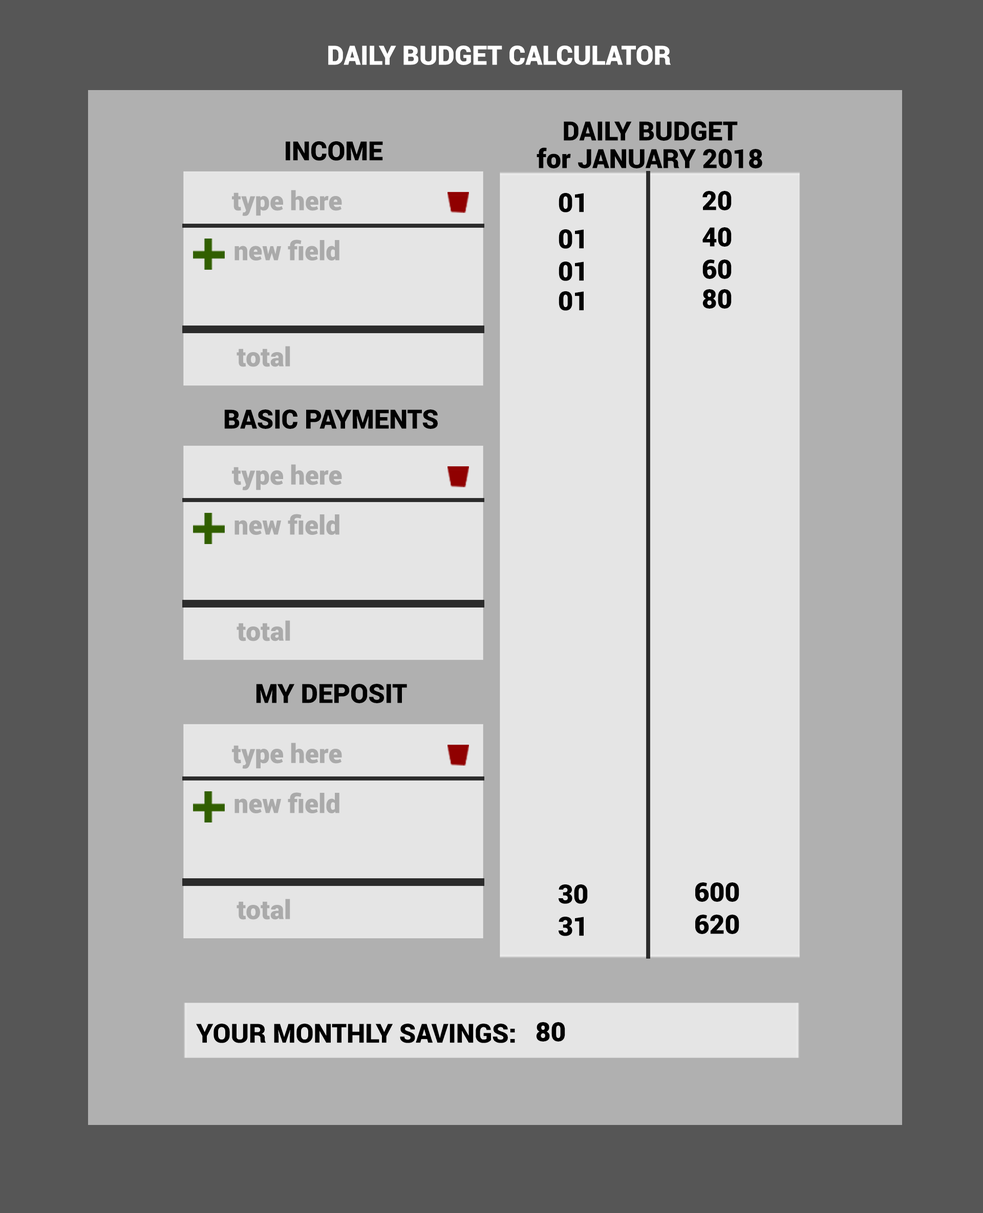
<style>
.page{position:relative;width:983px;height:1213px;background:#e5e5e5}
.page>*{position:absolute;margin:0}
.t1{font:26.3px "Roboto-Black";color:#ffffff}
.t2{font:26.3px "Roboto-Black";color:#010101}
.t3{font:26.3px "Roboto-Black";color:#aaaaaa}
.t4{font:26.3px "Roboto-Black";color:#000000}
</style>
<div class="page">
<p class="t1" style="left:328px;top:46px;width:343px;height:19px">DAILY BUDGET CALCULATOR</p>
<p class="t2" style="left:564px;top:121px;width:174px;height:20px">DAILY BUDGET</p>
<p class="t2" style="left:286px;top:141px;width:97px;height:20px">INCOME</p>
<p class="t2" style="left:536px;top:147px;width:226px;height:21px">for JANUARY 2018</p>
<p class="t3" style="left:232px;top:190px;width:110px;height:26px">type here</p>
<p class="t2" style="left:558px;top:193px;width:26px;height:19px">01</p>
<p class="t2" style="left:702px;top:191px;width:30px;height:19px">20</p>
<p class="t2" style="left:558px;top:229px;width:26px;height:20px">01</p>
<p class="t2" style="left:702px;top:227px;width:30px;height:20px">40</p>
<p class="t3" style="left:234px;top:240px;width:105px;height:21px">new field</p>
<p class="t2" style="left:558px;top:262px;width:26px;height:19px">01</p>
<p class="t2" style="left:702px;top:260px;width:30px;height:19px">60</p>
<p class="t2" style="left:558px;top:291px;width:26px;height:20px">01</p>
<p class="t2" style="left:702px;top:289px;width:30px;height:20px">80</p>
<p class="t3" style="left:237px;top:346px;width:53px;height:21px">total</p>
<p class="t2" style="left:224px;top:410px;width:214px;height:19px">BASIC PAYMENTS</p>
<p class="t2" style="left:256px;top:684px;width:151px;height:19px">MY DEPOSIT</p>
<p class="t2" style="left:558px;top:885px;width:30px;height:19px">30</p>
<p class="t2" style="left:695px;top:883px;width:44px;height:19px">600</p>
<p class="t2" style="left:558px;top:917px;width:26px;height:19px">31</p>
<p class="t2" style="left:695px;top:915px;width:44px;height:19px">620</p>
<p class="t4" style="left:196px;top:1024px;width:319px;height:19px">YOUR MONTHLY SAVINGS:</p>
<p class="t2" style="left:536px;top:1022px;width:29px;height:20px">80</p>
</div>
